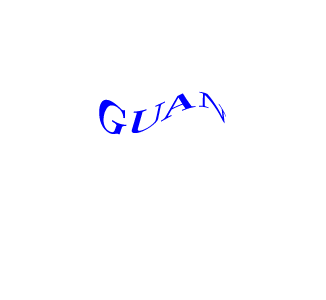
<style>
.page{position:relative;width:326px;height:300px;background:#ffffff}
.page>*{position:absolute;margin:0}
.t1{font:29.5px "YouYuan";color:#0000ff;scale:2.19 1}
</style>
<div class="page">
<p class="t1" style="left:99px;top:91px;width:127px;height:44px;rotate:9deg">GUAN</p>
</div>
